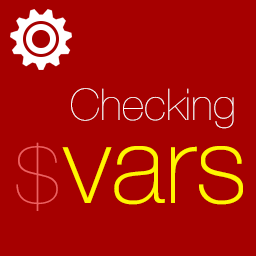
<style>
.page{position:relative;width:256px;height:256px;background:#a60000}
.page>*{position:absolute;margin:0}
.t1{font:43.7px "HelveticaNeue-UltraLight";color:#ffffff}
.t2{font:78px "HelveticaNeue-UltraLight";color:#ee6060}
.t3{font:108.3px "HelveticaNeue-Thin";color:#fff600}
</style>
<div class="page">
<p class="t1" style="left:71px;top:88px;width:163px;height:41px">Checking</p>
<p class="t2" style="left:16px;top:142px;width:42px;height:69px">$</p>
<p class="t3" style="left:62px;top:146px;width:181px;height:59px">vars</p>
</div>
